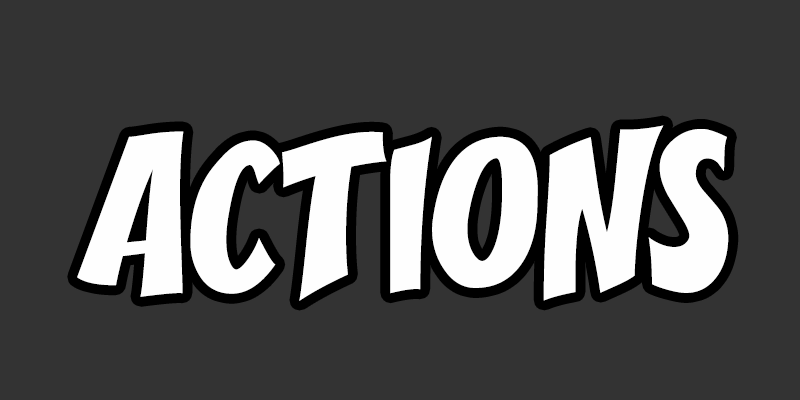
<style>
.page{position:relative;width:800px;height:400px;background:#333333}
.page>*{position:absolute;margin:0}
.t1{font:200px "Yikes";color:#fefefe}
</style>
<div class="page">
<p class="t1" style="left:77px;top:125px;width:652px;height:176px">ACTIONS</p>
</div>
